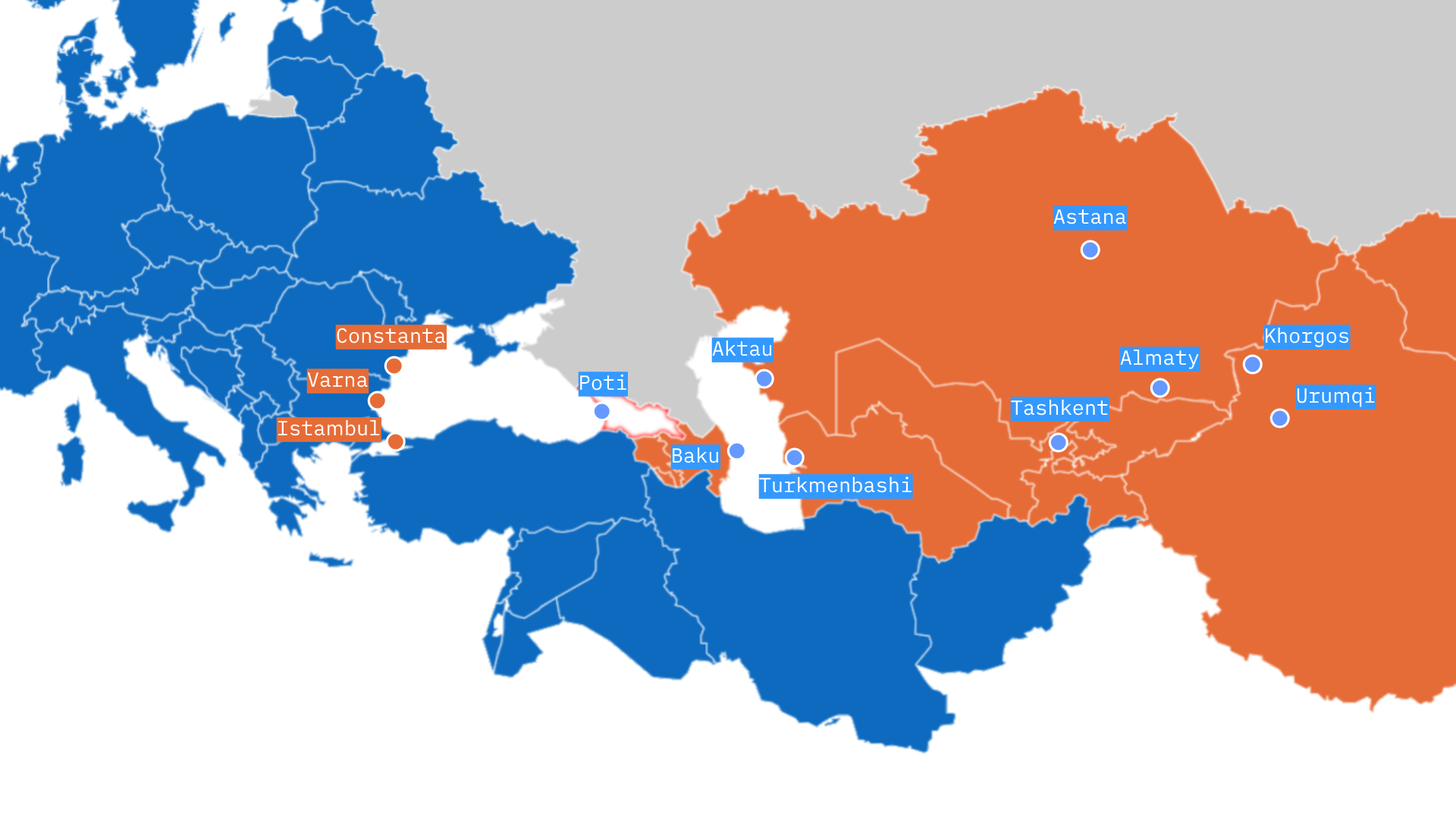
<style>
.page{position:relative;width:1456px;height:819px;background:#ffffff}
.page>*{position:absolute;margin:0}
.t1{font:20.5px "iAWriterDuospace-Regular";color:#3399ff}
.t2{font:20.5px "iAWriterDuospace-Regular";color:#e66c37}
</style>
<div class="page">
<p class="t1" style="left:1053px;top:206px;width:75px;height:25px">Astana</p>
<p class="t2" style="left:335px;top:325px;width:112px;height:25px">Constanta</p>
<p class="t1" style="left:711px;top:337px;width:63px;height:25px">Aktau</p>
<p class="t2" style="left:306px;top:369px;width:63px;height:25px">Varna</p>
<p class="t1" style="left:578px;top:372px;width:51px;height:25px">Poti</p>
<p class="t1" style="left:1295px;top:384px;width:81px;height:25px">Urumqi</p>
<p class="t2" style="left:276px;top:417px;width:105px;height:25px">Istambul</p>
<p class="t1" style="left:670px;top:444px;width:51px;height:25px">Baku</p>
<p class="t1" style="left:758px;top:474px;width:155px;height:25px">Turkmenbashi</p>
</div>
